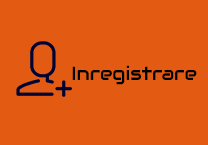
<style>
.page{position:relative;width:208px;height:145px;background:#e35b13}
.page>*{position:absolute;margin:0}
.t1{font:19px "Audiowide-Regular";color:#000000}
</style>
<div class="page">
<p class="t1" style="left:72px;top:65px;width:125px;height:20px">Inregistrare</p>
</div>
